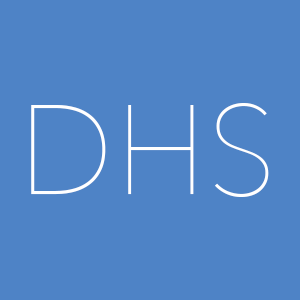
<style>
.page{position:relative;width:300px;height:300px;background:#4e83c6}
.page>*{position:absolute;margin:0}
.t1{font:125px "AvenirNext-UltraLight";color:#ffffff}
</style>
<div class="page">
<p class="t1" style="left:31px;top:103px;width:238px;height:94px">DHS</p>
</div>
